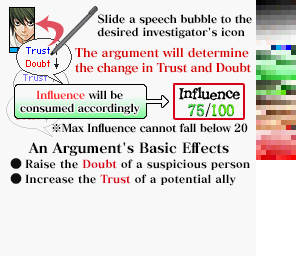
<style>
.page{position:relative;width:296px;height:256px;background:#f8f8f8}
.page>*{position:absolute;margin:0}
.t1{font:11px/13px "MatissePro-EB";letter-spacing:-0.025em;color:#000000}
.t2{font:11px/13px "MatissePro-EB";letter-spacing:-0.045em;color:#000000}
.t3{font:12px "MatissePro-EB";letter-spacing:-0.05em;color:#d80000}
.t4{font:12px "MatissePro-EB";letter-spacing:-0.025em;color:#d80000}
.t5{font:11px "MatissePro-EB";letter-spacing:-0.05em;color:#000000}
.t6{font:11px "MatissePro-EB";letter-spacing:-0.05em;color:#f83030}
.t7{font:14px "MatissePro-EB";letter-spacing:-0.025em;color:#000000}
.t8{font:11px/15px "MatissePro-EB";letter-spacing:-0.01em;color:#000000}
.t9{font:11px/15px "MatissePro-EB";letter-spacing:-0.01em;color:#d80018}
</style>
<div class="page">
<p class="t1" style="left:97px;top:14px;width:155px;height:25px">Slide a <span class="t2">speech bubble to the<br></span>desired investigator's icon</p>
<p class="t3" style="left:75px;top:47px;width:176px;height:28px"><span class="t4">The argument will determine<br></span>the change in Trust and Doubt</p>
<p class="t5" style="left:20px;top:90px;width:120px;height:25px;text-align:center"><span class="t6">Influence</span> will be<br>consumed accordingly</p>
<p class="t5" style="left:52px;top:123px;width:196px;height:10px">※Max Influence cannot fall below 20</p>
<p class="t7" style="left:28px;top:142px;width:201px;height:14px">An Argument's Basic Effects</p>
<p class="t8" style="left:25px;top:159px;width:225px;height:27px">Raise the <span class="t9">Doubt</span> of a suspicious person<br>Increase the <span class="t9">Trust</span> of a potential ally</p>
</div>
